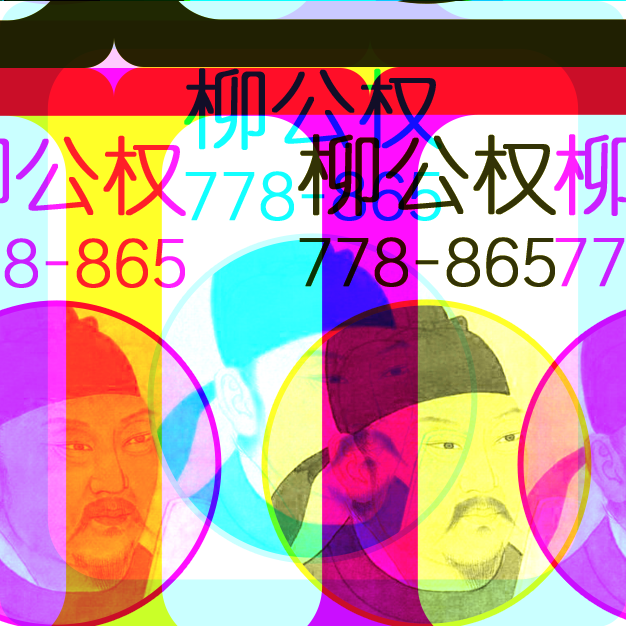
<style>
.page{position:relative;width:626px;height:626px}
.page>*{position:absolute;margin:0}
.t1{font:85.2px "YouYuan";font-weight:bold}
.t2{font:63.8px "MI-LANTING--GBK1-Light";font-weight:bold}
</style>
<div class="page">
<p class="t1" style="left:184px;top:67px;width:258px;height:82px">柳公权</p>
<p class="t2" style="left:185px;top:170px;width:256px;height:50px">778-865</p>
</div>
